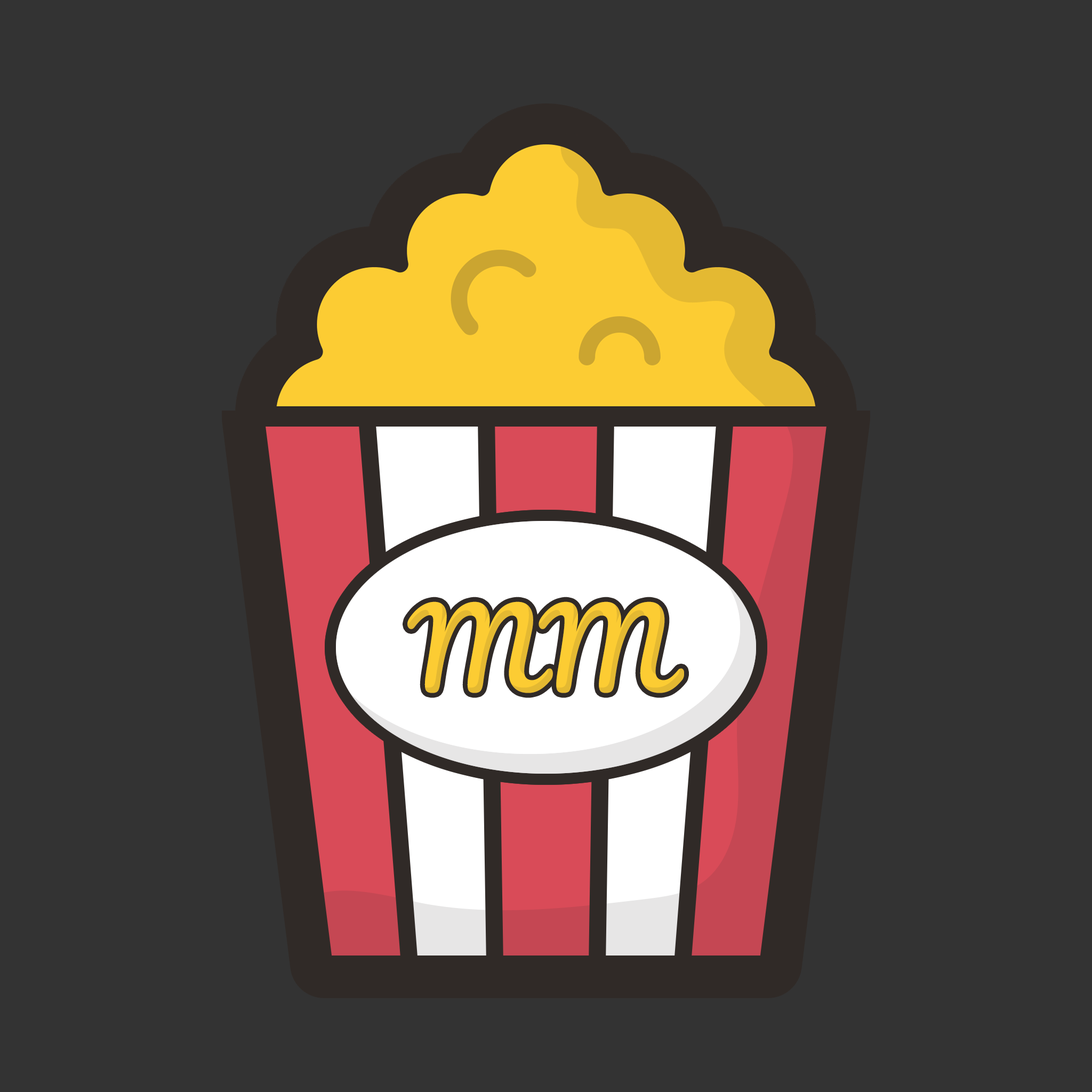
<style>
.page{position:relative;width:1092px;height:1092px;background:#333333}
.page>*{position:absolute;margin:0}
.t1{font:106.6px "Pacifico-Regular"}
</style>
<div class="page">
<p class="t1" style="left:407px;top:601px;width:277px;height:92px">MM</p>
</div>
